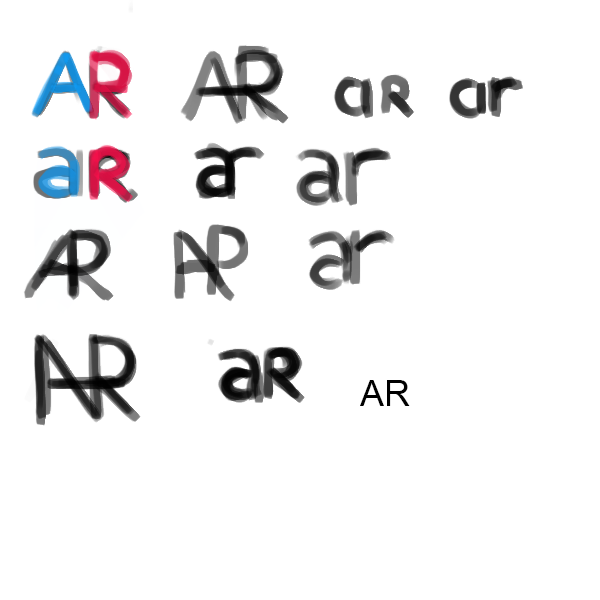
<style>
.page{position:relative;width:600px;height:600px;background:#ffffff}
.page>*{position:absolute;margin:0}
.t1{font:36px "ArialMT";color:#000000}
</style>
<div class="page">
<p class="t1" style="left:360px;top:380px;width:50px;height:26px">AR</p>
</div>
